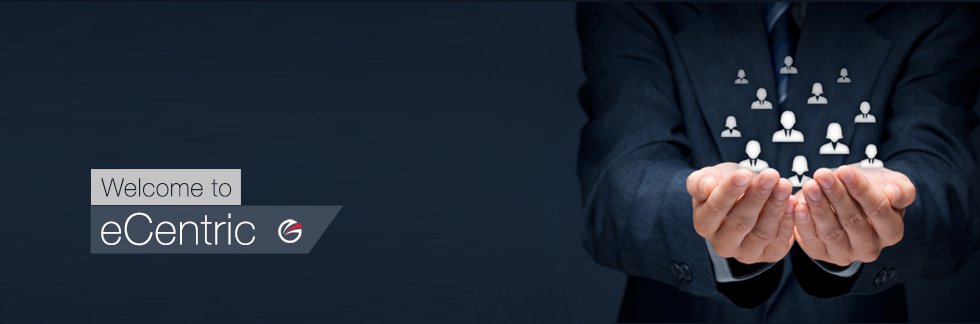
<style>
.page{position:relative;width:980px;height:324px}
.page>*{position:absolute;margin:0}
.t1{font:25.2px "HelveticaNeue-Thin";letter-spacing:0.02em;color:#182434}
.t2{font:43.2px "HelveticaNeue-Thin";letter-spacing:0.02em;color:#fbfbfb}
</style>
<div class="page">
<p class="t1" style="left:101px;top:178px;width:131px;height:19px">Welcome to</p>
<p class="t2" style="left:101px;top:212px;width:154px;height:34px">eCentric</p>
</div>
